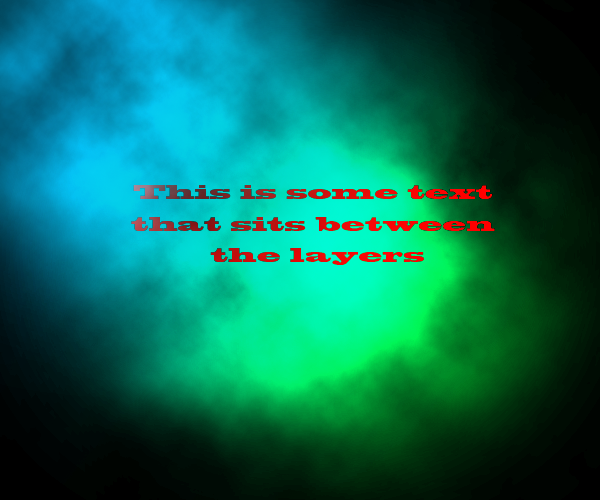
<style>
.page{position:relative;width:600px;height:500px}
.page>*{position:absolute;margin:0}
.t1{font:18px "BlackoakStd"}
</style>
<div class="page">
<p class="t1" style="left:131px;top:185px;width:364px;height:80px;text-align:center">This is some text<br>that sits between<br> the layers</p>
</div>
